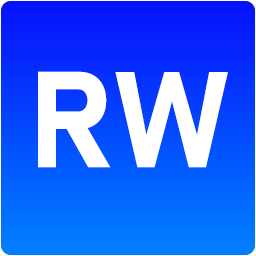
<style>
.page{position:relative;width:256px;height:256px}
.page>*{position:absolute;margin:0}
.t1{font:134px "Bahnschrift-Bold";color:#ffffff}
</style>
<div class="page">
<p class="t1" style="left:38px;top:71px;width:190px;height:97px">RW</p>
</div>
